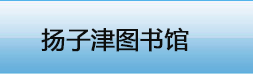
<style>
.page{position:relative;width:253px;height:74px}
.page>*{position:absolute;margin:0}
.t1{font:24px "MicrosoftYaHei";color:#0d0e0d;font-weight:bold}
</style>
<div class="page">
<p class="t1" style="left:41px;top:27px;width:148px;height:25px">扬子津图书馆</p>
</div>
